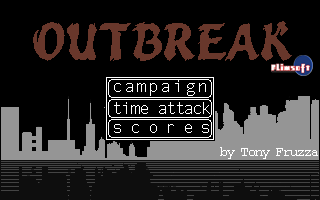
<style>
.page{position:relative;width:320px;height:200px;background:#000000}
.page>*{position:absolute;margin:0}
.t1{font:18px "AndaleMono";letter-spacing:0.065em;color:#ffffff}
.t2{font:18px "AndaleMono";letter-spacing:-0.115em;color:#ffffff}
.t3{font:18px "AndaleMono";letter-spacing:0.365em;color:#ffffff}
.t4{font:15px "CourierNewPSMT";letter-spacing:-0.135em;color:#ffffff}
</style>
<div class="page">
<p class="t1" style="left:114px;top:80px;width:92px;height:16px">campaign</p>
<p class="t2" style="left:114px;top:102px;width:96px;height:12px">time attack</p>
<p class="t3" style="left:114px;top:124px;width:95px;height:9px">scores</p>
<p class="t4" style="left:220px;top:147px;width:98px;height:12px">by Tony Fruzza</p>
</div>
